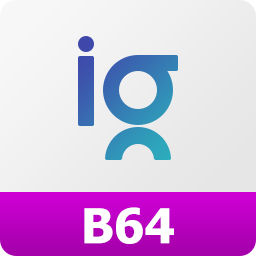
<style>
.page{position:relative;width:256px;height:256px}
.page>*{position:absolute;margin:0}
.t1{font:48px "Tahoma-Bold";color:#ffffff}
</style>
<div class="page">
<p class="t1" style="left:84px;top:207px;width:90px;height:37px">B64</p>
</div>
